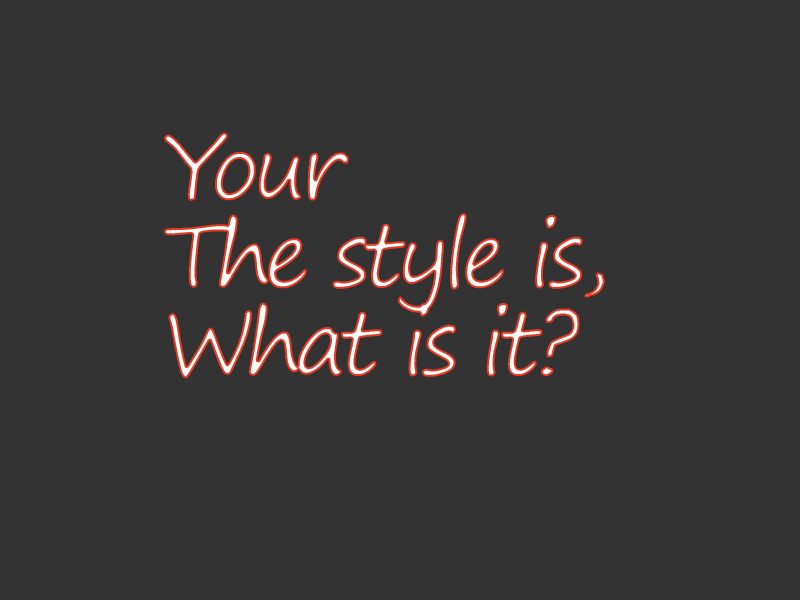
<style>
.page{position:relative;width:800px;height:600px;background:#333333}
.page>*{position:absolute;margin:0}
.t1{font:88px/88px "SegoePrint";letter-spacing:-0.075em}
</style>
<div class="page">
<p class="t1" style="left:164px;top:132px;width:441px;height:247px">Your<br>The style is,<br>What is it?</p>
</div>
